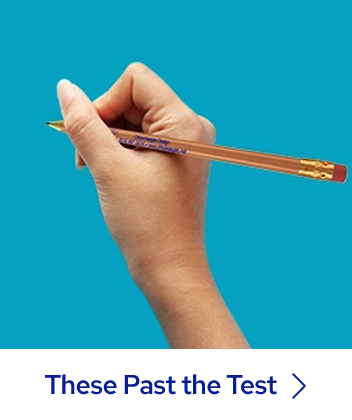
<style>
.page{position:relative;width:352px;height:420px;background:#06a0c2}
.page>*{position:absolute;margin:0}
.t1{font:26.7px "RedHatText-Medium";letter-spacing:-0.025em;color:#0a1f8f}
</style>
<div class="page">
<p class="t1" style="left:45px;top:374px;width:232px;height:21px">These Past the Test</p>
</div>
